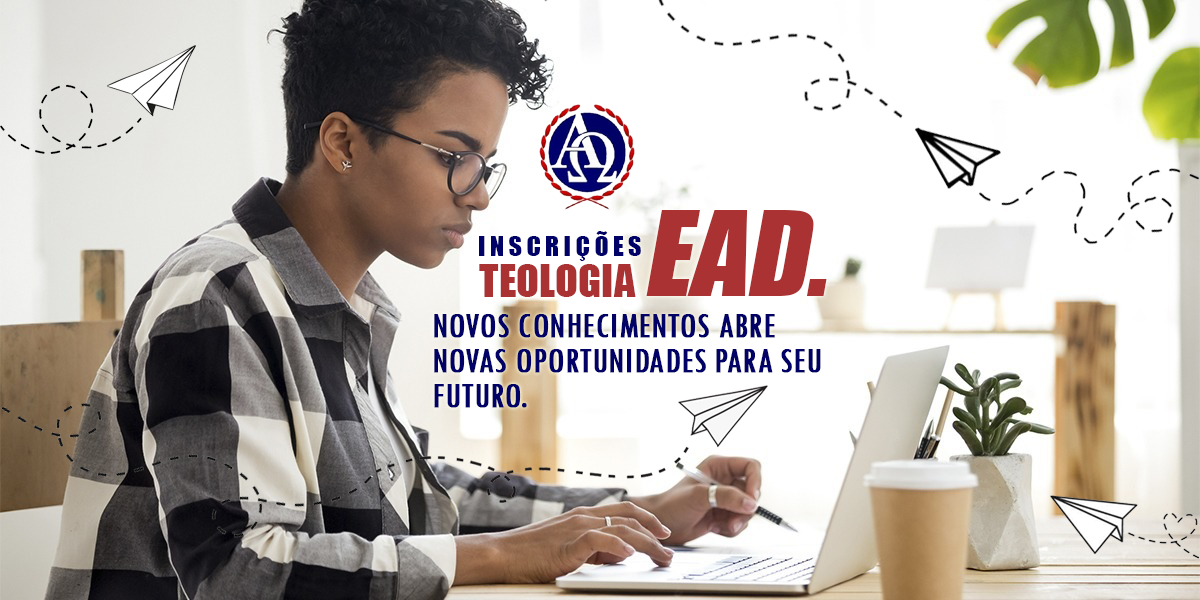
<style>
.page{position:relative;width:1200px;height:600px;background:#ffffff}
.page>*{position:absolute;margin:0}
.t1{font:109.3px "Impact";color:#aa3233;font-style:italic}
.t2{font:25.5px "Impact";letter-spacing:0.18em;color:#010267;text-transform:uppercase}
.t3{font:42.2px "Impact";color:#aa3233;text-transform:uppercase}
.t4{font:36.7px/35px "TwCenMT-Condensed";color:#010166;text-transform:uppercase;font-weight:bold}
</style>
<div class="page">
<p class="t1" style="left:646px;top:210px;width:181px;height:86px">EAD.</p>
<p class="t2" style="left:479px;top:231px;width:162px;height:30px">InScrições</p>
<p class="t3" style="left:479px;top:264px;width:157px;height:33px">Teologia</p>
<p class="t4" style="left:434px;top:314px;width:387px;height:94px">Novos conhecimentos abre<br>novas oportunidades para seu<br>futuro.</p>
</div>
